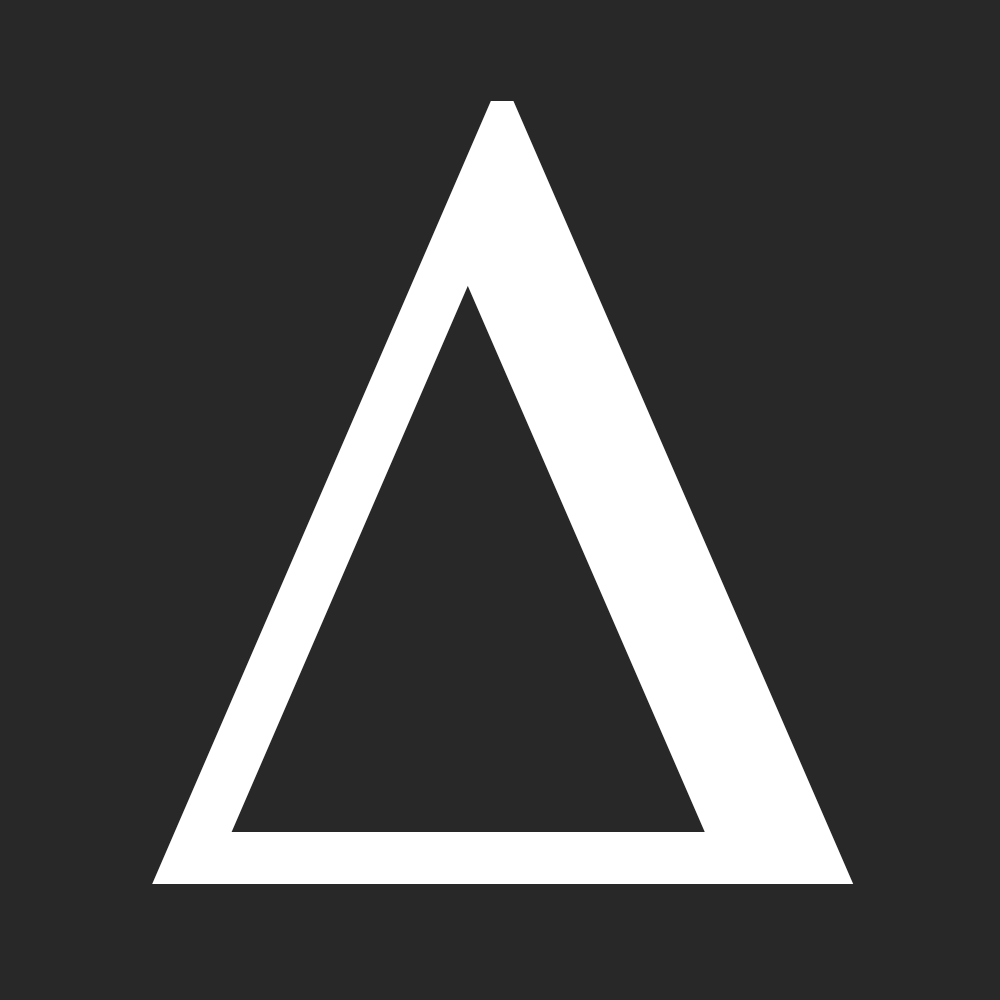
<style>
.page{position:relative;width:1000px;height:1000px;background:#282828}
.page>*{position:absolute;margin:0}
.t1{font:1148px "Times-Roman";color:#ffffff}
</style>
<div class="page">
<p class="t1" style="left:152px;top:101px;width:702px;height:783px">∆</p>
</div>
